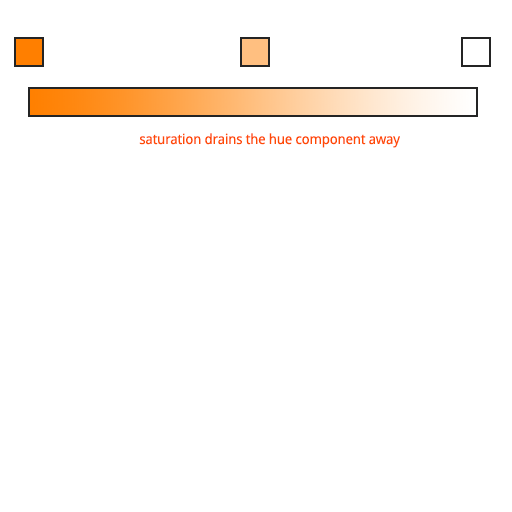
<style>
.page{position:relative;width:512px;height:512px;background:#ffffff}
.page>*{position:absolute;margin:0}
.t1{font:14px "DroidSans";letter-spacing:-0.018em;color:#ff4b03}
</style>
<div class="page">
<p class="t1" style="left:139px;top:133px;width:261px;height:15px">saturation drains the hue component away</p>
</div>
